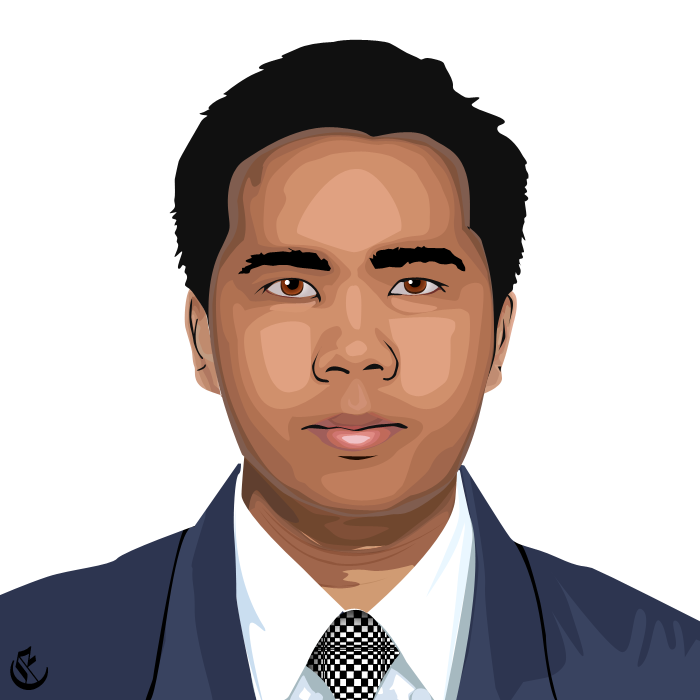
<style>
.page{position:relative;width:700px;height:700px;background:#ffffff}
.page>*{position:absolute;margin:0}
.t1{font:55px "OldEnglishTextMT";color:#000000}
</style>
<div class="page">
<p class="t1" style="left:10px;top:646px;width:38px;height:44px;rotate:-37deg">E</p>
</div>
